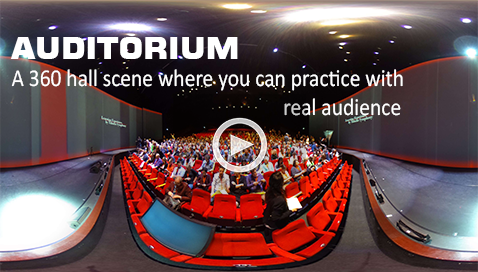
<style>
.page{position:relative;width:478px;height:272px}
.page>*{position:absolute;margin:0}
.t1{font:30px "Moire-ExtraBold";color:#ffffff}
.t2{font:24.1px "Calibri";color:#ffffff;scale:0.89 1}
</style>
<div class="page">
<p class="t1" style="left:10px;top:37px;width:228px;height:22px">AUDITORIUM</p>
<p class="t2" style="left:11px;top:69px;width:392px;height:47px;text-align:center">A 360 hall scene where you can practice with <br>               real audience</p>
</div>
